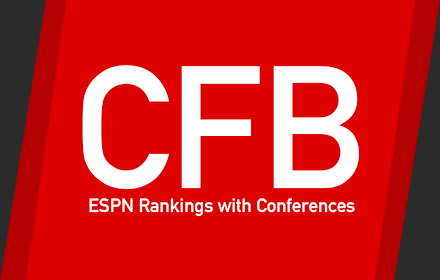
<style>
.page{position:relative;width:440px;height:280px;background:#dd0000}
.page>*{position:absolute;margin:0}
.t1{font:171.1px "DINAlternate-Bold";color:#ffffff}
.t2{font:19px "DINAlternate-Bold";color:#ffffff}
</style>
<div class="page">
<p class="t1" style="left:82px;top:65px;width:277px;height:124px">CFB</p>
<p class="t2" style="left:89px;top:198px;width:266px;height:19px">ESPN Rankings with Conferences</p>
</div>
